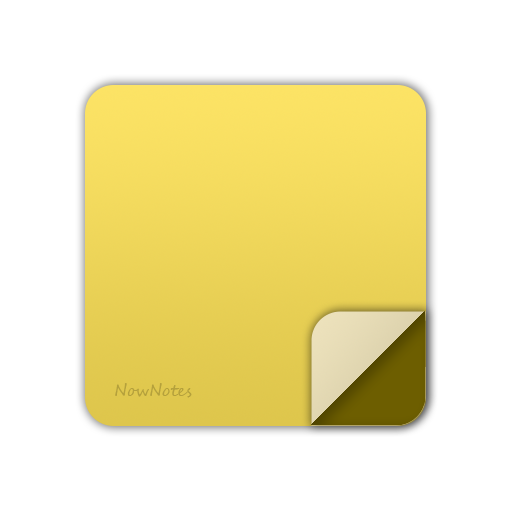
<style>
.page{position:relative;width:512px;height:512px;background:#ffffff}
.page>*{position:absolute;margin:0}
.t1{font:15.6px "SegoeScript";color:#b5a13c}
</style>
<div class="page">
<p class="t1" style="left:115px;top:383px;width:77px;height:15px">NowNotes</p>
</div>
